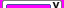
<style>
.page{position:relative;width:64px;height:8px;background:#ffffff}
.page>*{position:absolute;margin:0}
.t1{font:7.7px "Arial-Black";letter-spacing:-0.01em;color:#101010;scale:1.18 1}
</style>
<div class="page">
<p class="t1" style="left:52px;top:2px;width:8px;height:6px">V</p>
</div>
